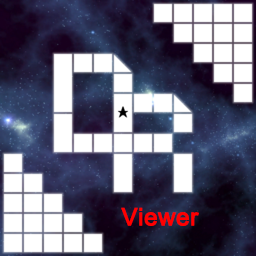
<style>
.page{position:relative;width:256px;height:256px;background:#ffffff}
.page>*{position:absolute;margin:0}
.t1{font:24px "ArialMT";color:#ff0000;font-weight:bold}
</style>
<div class="page">
<p class="t1" style="left:121px;top:207px;width:78px;height:19px">Viewer</p>
</div>
